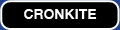
<style>
.page{position:relative;width:120px;height:30px;background:#000000}
.page>*{position:absolute;margin:0}
.t1{font:14px "Helvetica-Bold";color:#ffffff}
</style>
<div class="page">
<p class="t1" style="left:24px;top:9px;width:73px;height:10px">CRONKITE</p>
</div>
